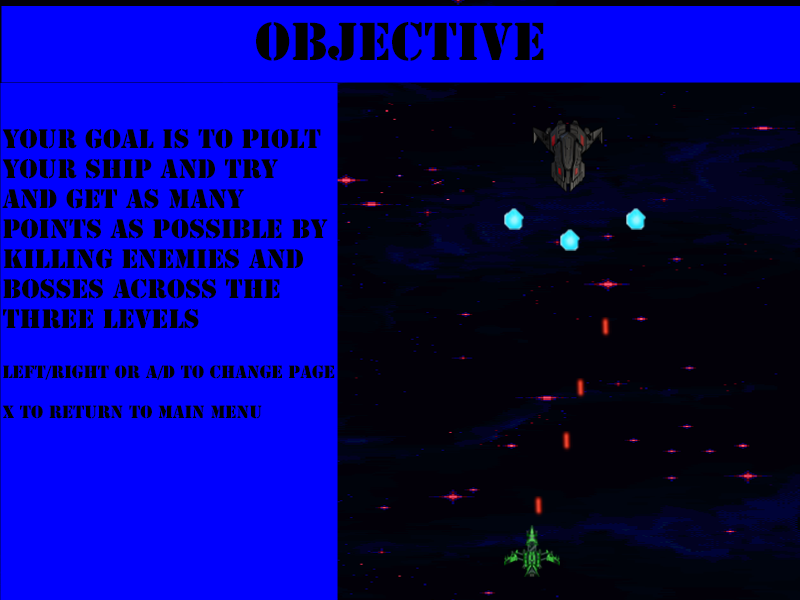
<style>
.page{position:relative;width:800px;height:600px;background:#0000ff}
.page>*{position:absolute;margin:0}
.t1{font:49.8px "StencilStd";color:#000000}
.t2{font:25px "StencilStd";color:#000000}
.t3{font:16.7px "StencilStd";color:#000000}
</style>
<div class="page">
<p class="t1" style="left:256px;top:22px;width:288px;height:39px">Objective</p>
<p class="t2" style="left:2px;top:129px;width:333px;height:290px">Your Goal is to piolt your ship and try and get as many points as possible by killing enemies and bosses across the three levels<br><br><span class="t3">left/right or A/d to change page<br><br>X to return to main Menu</span></p>
</div>
